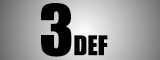
<style>
.page{position:relative;width:160px;height:60px}
.page>*{position:absolute;margin:0}
.t1{font:65px "Impact";color:#000000}
.t2{font:25px "Impact";color:#000000}
</style>
<div class="page">
<p class="t1" style="left:41px;top:3px;width:31px;height:54px">3</p>
<p class="t2" style="left:74px;top:35px;width:34px;height:21px">DEF</p>
</div>
